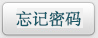
<style>
.page{position:relative;width:98px;height:38px;background:#f0f0f0}
.page>*{position:absolute;margin:0}
.t1{font:16px "STSong";color:#1c5a69;font-weight:bold}
</style>
<div class="page">
<p class="t1" style="left:16px;top:10px;width:65px;height:17px">忘记密码</p>
</div>
